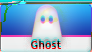
<style>
.page{position:relative;width:92px;height:52px}
.page>*{position:absolute;margin:0}
.t1{font:11px "TrebuchetMS";letter-spacing:0.05em}
</style>
<div class="page">
<p class="t1" style="left:31px;top:38px;width:30px;height:8px">Ghost</p>
</div>
